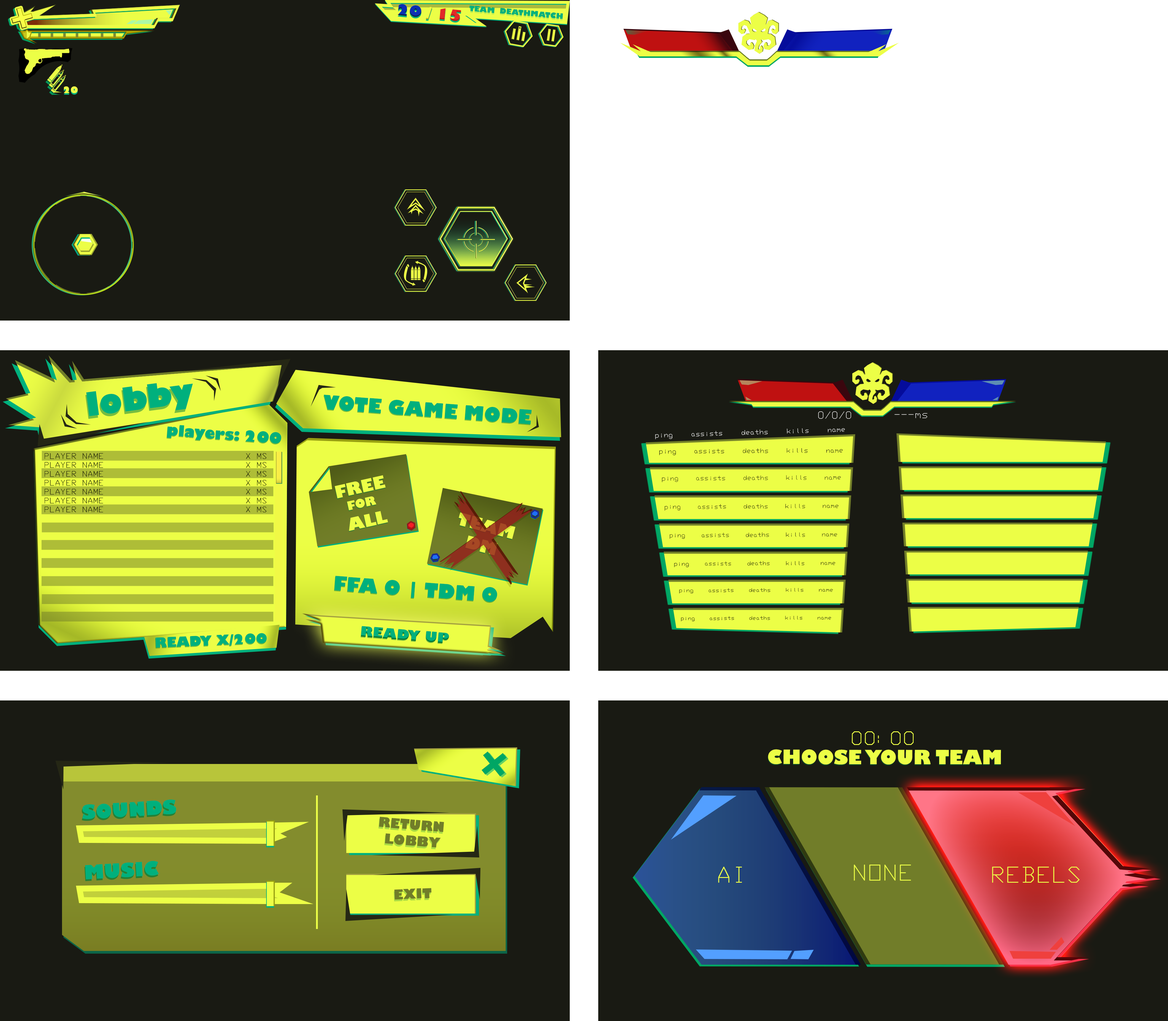
<style>
.page{position:relative;width:1168px;height:1021px;background:#191a13}
.page>*{position:absolute;margin:0}
.t1{font:15px "GillSans-UltraBold";color:#0c2fb4}
.t2{font:15px "GillSans-UltraBold";color:#ecfe46}
.t3{font:15px "GillSans-UltraBold";color:#e12929}
.t4{font:7.4px "GillSans-UltraBold";color:#00b07d}
.t5{font:8.9px "GillSans-UltraBold";color:#ecfe46}
.t6{font:32.2px "GillSans-UltraBold";color:#00b07d}
.t7{font:19.3px "GillSans-UltraBold";color:#00b07d}
.t8{font:9.4px "SWMono";color:#ffffff}
.t9{font:14.8px "GillSans-UltraBold";color:#00b07d}
.t10{font:6.1px "SWMono";color:#ffffff}
.t11{font:5.9px "SWMono";color:#000000}
.t12{font:7.4px "SWMono";color:#000000}
.t13{font:16.8px "GillSans-UltraBold";color:#ecfe46}
.t14{font:11.9px "GillSans-UltraBold";color:#ecfe46}
.t15{font:5.8px "SWMono";color:#000000}
.t16{font:5.6px "SWMono";color:#000000}
.t17{font:16.8px "GillSans-UltraBold"}
.t18{font:5.4px "SWMono";color:#000000}
.t19{font:5.2px "SWMono"}
.t20{font:4.8px "SWMono";color:#000000;scale:1.05 1}
.t21{font:4.7px "SWMono";scale:1.05 1}
.t22{font:14px "GillSans-UltraBold";color:#00b07d}
.t23{font:13.4px "GillSans-UltraBold";color:#00b07d}
.t24{font:17.8px "SWMono";color:#ecfe46}
.t25{font:19.3px "GillSans-UltraBold";color:#ecfe46}
.t26{font:19px "GillSans-UltraBold";color:#00b07d}
.t27{font:13.4px "GillSans-UltraBold";color:#717d29}
.t28{font:20.8px "SWMono";color:#ecfe46}
</style>
<div class="page">
<p class="t1" style="left:398px;top:4px;width:63px;height:17px;rotate:6deg">20 <span class="t2">/ </span><span class="t3">15</span></p>
<p class="t4" style="left:469px;top:5px;width:94px;height:14px;rotate:5deg">TEAM  DEATHMATCH</p>
<p class="t5" style="left:64px;top:86px;width:14px;height:7px">20</p>
<p class="t6" style="left:86px;top:383px;width:107px;height:33px;rotate:-7deg">lobby</p>
<p class="t7" style="left:324px;top:394px;width:208px;height:30px;rotate:4deg">VOTE GAME MODE</p>
<p class="t8" style="left:818px;top:411px;width:33px;height:8px">0/0/0</p>
<p class="t8" style="left:894px;top:413px;width:33px;height:5px">---ms</p>
<p class="t9" style="left:167px;top:425px;width:114px;height:19px;rotate:4deg">players: 200</p>
<p class="t10" style="left:655px;top:428px;width:190px;height:11px;rotate:-2deg">ping    assists    deaths    kills    name</p>
<p class="t11" style="left:659px;top:448px;width:184px;height:7px">ping    assists    deaths    kills    name</p>
<p class="t12" style="left:45px;top:453px;width:221px;height:59px">PLAYER NAME                          X MS<br>PLAYER NAME                          X MS<br>PLAYER NAME                          X MS<br>PLAYER NAME                          X MS<br>PLAYER NAME                          X MS<br>PLAYER NAME                          X MS<br>PLAYER NAME                          X MS</p>
<p class="t13" style="left:335px;top:475px;width:53px;height:56px;text-align:center;rotate:-13deg">FREE<br><span class="t14">FOR <br></span>ALL</p>
<p class="t15" style="left:662px;top:475px;width:179px;height:7px">ping    assists    deaths    kills    name</p>
<p class="t16" style="left:665px;top:504px;width:174px;height:7px">ping    assists    deaths    kills    name</p>
<p class="t17" style="left:459px;top:512px;width:56px;height:44px;text-align:center;rotate:15deg">TEAM<br>DM</p>
<p class="t18" style="left:670px;top:532px;width:167px;height:7px">ping    assists    deaths    kills    name</p>
<p class="t19" style="left:674px;top:561px;width:161px;height:6px">ping    assists    deaths    kills    name</p>
<p class="t7" style="left:334px;top:576px;width:163px;height:26px;rotate:4deg">FFA 0 | TDM O</p>
<p class="t20" style="left:679px;top:588px;width:154px;height:6px">ping    assists    deaths    kills    name</p>
<p class="t21" style="left:681px;top:615px;width:150px;height:6px">ping    assists    deaths    kills    name</p>
<p class="t22" style="left:361px;top:626px;width:88px;height:17px;rotate:5deg">READY UP</p>
<p class="t23" style="left:363px;top:626px;width:84px;height:17px;rotate:5deg">READY UP</p>
<p class="t23" style="left:156px;top:633px;width:111px;height:15px;rotate:-2deg">READY X/200</p>
<p class="t24" style="left:852px;top:731px;width:62px;height:14px">00:00</p>
<p class="t25" style="left:768px;top:749px;width:233px;height:15px">CHOOSE YOUR TEAM</p>
<p class="t26" style="left:82px;top:799px;width:94px;height:20px;rotate:-3deg">SOUNDS</p>
<p class="t27" style="left:379px;top:817px;width:65px;height:31px;text-align:center;rotate:5deg">RETURN <br>LOBBY</p>
<p class="t26" style="left:85px;top:861px;width:74px;height:18px;rotate:-3deg">MUSIC</p>
<p class="t28" style="left:718px;top:867px;width:24px;height:16px">AI</p>
<p class="t28" style="left:854px;top:864px;width:57px;height:16px">NONE</p>
<p class="t28" style="left:992px;top:867px;width:88px;height:16px">REBELS</p>
<p class="t28" style="left:992px;top:867px;width:88px;height:16px">REBELS</p>
<p class="t27" style="left:394px;top:888px;width:37px;height:11px;rotate:-2deg">EXIT</p>
</div>
